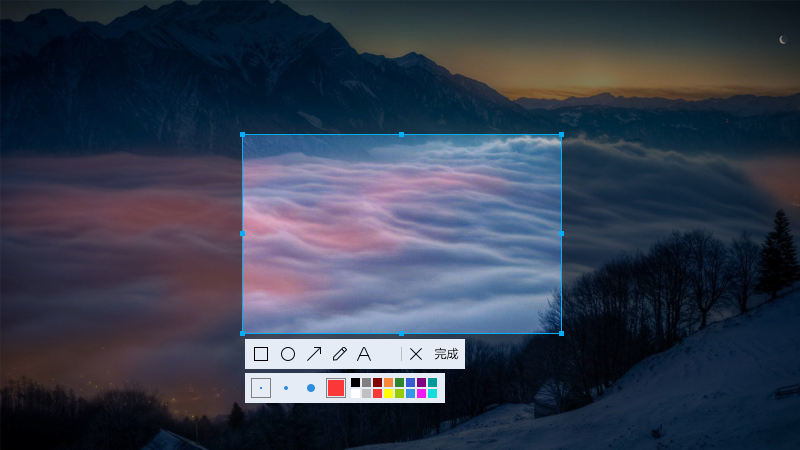
<style>
.page{position:relative;width:800px;height:450px}
.page>*{position:absolute;margin:0}
.t1{font:12px "MicrosoftYaHeiLight";color:#000000}
</style>
<div class="page">
<p class="t1" style="left:434px;top:347px;width:25px;height:13px">完成</p>
</div>
